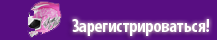
<style>
.page{position:relative;width:217px;height:40px;background:#580e82}
.page>*{position:absolute;margin:0}
.t1{font:18px "MyriadPro-BoldCond";color:#ffffff}
</style>
<div class="page">
<p class="t1" style="left:72px;top:19px;width:138px;height:17px">Зарегистрироваться!</p>
</div>
